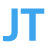
<style>
.page{position:relative;width:48px;height:48px;background:#ffffff}
.page>*{position:absolute;margin:0}
.t1{font:48px "FranklinGothic-Medium";color:#3da5ee}
</style>
<div class="page">
<p class="t1" style="left:3px;top:8px;width:42px;height:34px">JT</p>
</div>
